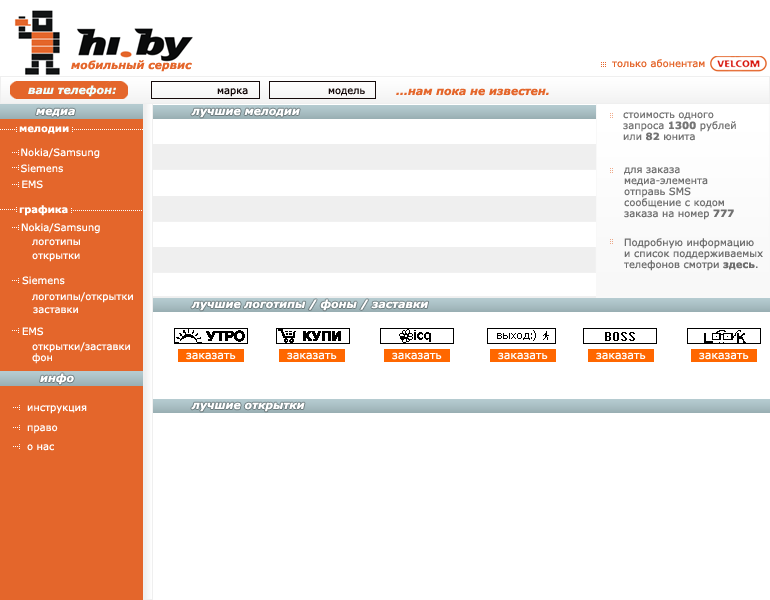
<style>
.page{position:relative;width:770px;height:600px;background:#ffffff}
.page>*{position:absolute;margin:0}
.t1{font:11px "Verdana-BoldItalic";color:#e4662b}
.t2{font:11px "Verdana-BoldItalic";color:#edffff}
.t3{font:10px "Verdana";color:#150a0a}
.t4{font:11px "Verdana-BoldItalic";color:#ffffff}
.t5{font:10px/11px "Verdana";color:#757575}
.t6{font:10px/11px "Verdana-Bold";color:#757575}
.t7{font:10px "Verdana-Bold";color:#ffffff}
.t8{font:10px "Verdana";color:#ffffff}
.t9{font:10px/11px "Verdana";color:#727272}
.t10{font:10px/11px "Verdana-Bold";color:#727272}
.t11{font:10px/11px "Verdana";color:#6f6f6f}
.t12{font:10px/11px "Verdana-Bold";color:#6f6f6f}
.t13{font:10px/11px "Verdana";color:#ffffff}
</style>
<div class="page">
<p class="t1" style="left:71px;top:60px;width:121px;height:12px">мобильный сервис</p>
<p class="t2" style="left:28px;top:85px;width:88px;height:12px">ваш телефон:</p>
<p class="t3" style="left:217px;top:88px;width:31px;height:9px">марка</p>
<p class="t3" style="left:328px;top:88px;width:37px;height:8px">модель</p>
<p class="t1" style="left:396px;top:88px;width:153px;height:8px">...нам пока не известен.</p>
<p class="t4" style="left:36px;top:108px;width:39px;height:9px">медиа</p>
<p class="t4" style="left:191px;top:108px;width:109px;height:10px">лучшие мелодии</p>
<p class="t5" style="left:623px;top:112px;width:113px;height:29px">стоимость одного <br>запроса <span class="t6">1300</span> рублей <br>или <span class="t6">82</span> юнита</p>
<p class="t7" style="left:19px;top:126px;width:50px;height:8px">мелодии</p>
<p class="t8" style="left:21px;top:148px;width:79px;height:11px">Nokia/Samsung</p>
<p class="t8" style="left:21px;top:164px;width:42px;height:9px">Siemens</p>
<p class="t9" style="left:624px;top:167px;width:110px;height:53px">для заказа <br>медиа-элемента <br>отправь SMS <br>сообщение с кодом <br>заказа на номер <span class="t10">777</span></p>
<p class="t8" style="left:22px;top:180px;width:21px;height:9px">EMS</p>
<p class="t7" style="left:19px;top:205px;width:49px;height:11px">графика</p>
<p class="t8" style="left:21px;top:223px;width:79px;height:11px">Nokia/Samsung</p>
<p class="t8" style="left:32px;top:239px;width:48px;height:7px">логотипы</p>
<p class="t11" style="left:624px;top:238px;width:139px;height:33px">Подробную информацию <br>и список поддерживаемых <br>телефонов смотри <span class="t12">здесь</span>.</p>
<p class="t8" style="left:32px;top:253px;width:48px;height:9px">открытки</p>
<p class="t8" style="left:22px;top:276px;width:43px;height:9px">Siemens</p>
<p class="t8" style="left:32px;top:292px;width:101px;height:11px">логотипы/открытки</p>
<p class="t4" style="left:191px;top:299px;width:238px;height:12px">лучшие логотипы / фоны / заставки</p>
<p class="t8" style="left:33px;top:307px;width:45px;height:7px">заставки</p>
<p class="t8" style="left:22px;top:327px;width:22px;height:9px">EMS</p>
<p class="t13" style="left:32px;top:342px;width:98px;height:22px">открытки/заставки<br>фон</p>
<p class="t4" style="left:40px;top:373px;width:34px;height:12px">инфо</p>
<p class="t8" style="left:27px;top:405px;width:60px;height:9px">инструкция</p>
<p class="t4" style="left:191px;top:402px;width:114px;height:10px">лучшие открытки</p>
<p class="t8" style="left:27px;top:425px;width:31px;height:9px">право</p>
<p class="t8" style="left:27px;top:444px;width:27px;height:7px">о нас</p>
</div>
